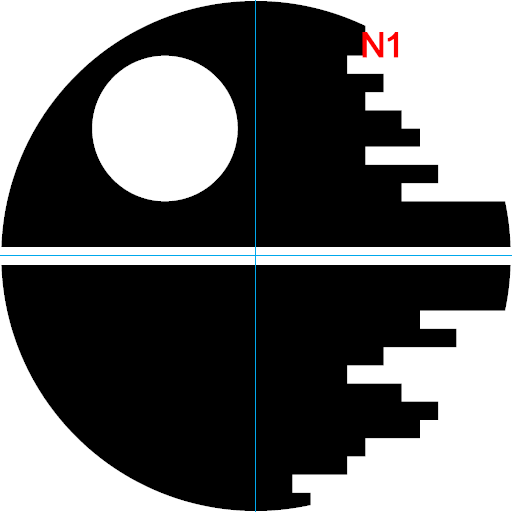
<style>
.page{position:relative;width:512px;height:512px;background:#000000}
.page>*{position:absolute;margin:0}
.t1{font:34.7px "ArialMT";letter-spacing:-0.058em;color:#ff0000;font-weight:bold}
</style>
<div class="page">
<p class="t1" style="left:362px;top:32px;width:37px;height:26px">N1</p>
</div>
